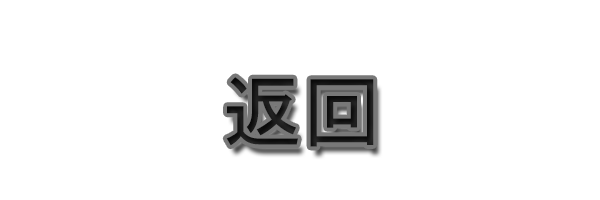
<style>
.page{position:relative;width:600px;height:200px;background:#ffffff}
.page>*{position:absolute;margin:0}
.t1{font:80px "MS-Gothic";color:#161616}
</style>
<div class="page">
<p class="t1" style="left:226px;top:77px;width:148px;height:70px">返回</p>
</div>
